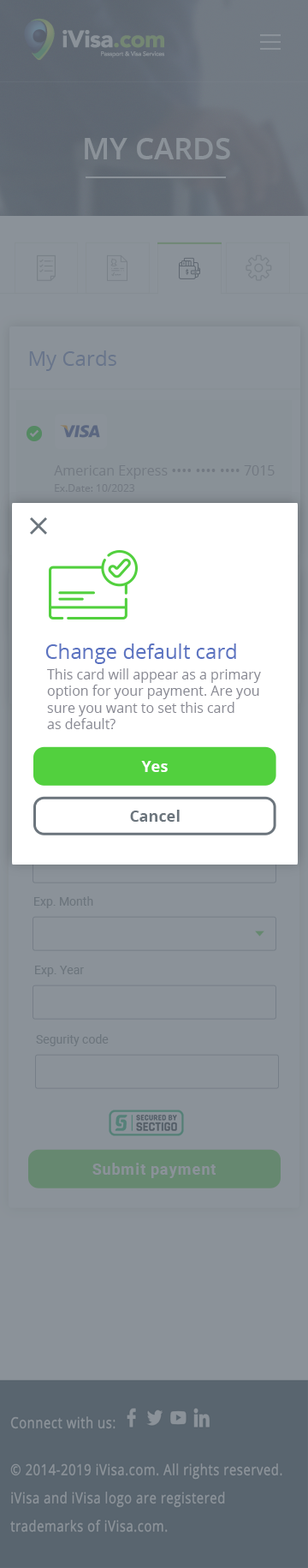
<style>
.page{position:relative;width:308px;height:1568px;background:#8b9299}
.page>*{position:absolute;margin:0}
.t1{font:30px "OpenSans-Semibold";color:#8b9299;text-transform:uppercase}
.t2{font:20.6px "OpenSans";color:#68758b}
.t3{font:13.7px "OpenSans";color:#878892}
.t4{font:10.3px "OpenSans";color:#878892}
.t5{font:20.6px "OpenSans";color:#5b73c1}
.t6{font:15.4px "OpenSans-Bold";color:#ffffff}
.t7{font:15.4px "OpenSans-Bold";color:#6c757d}
.t8{font:12px "Roboto-Regular";color:#6c757d}
.t9{font:12px "Roboto-Regular";color:#6c757d;text-transform:uppercase}
.t10{font:15.4px "Roboto-Bold";letter-spacing:0.05em;color:#8b9299}
</style>
<div class="page">
<p class="t1" style="left:85px;top:138px;width:145px;height:21px">MY CARDS</p>
<p class="t2" style="left:29px;top:350px;width:88px;height:21px">My Cards</p>
<p class="t2" style="left:29px;top:350px;width:88px;height:21px">My Cards</p>
<p class="t3" style="left:54px;top:465px;width:221px;height:14px">American Express •••• •••• •••• 7015</p>
<p class="t3" style="left:54px;top:465px;width:221px;height:14px">American Express •••• •••• •••• 7015</p>
<p class="t4" style="left:55px;top:484px;width:80px;height:8px">Ex.Date: 10/2023</p>
<p class="t4" style="left:55px;top:484px;width:80px;height:8px">Ex.Date: 10/2023</p>
<p class="t5" style="left:45px;top:643px;width:191px;height:21px">Change default card</p>
<p class="t3" style="left:47px;top:668px;width:214px;height:61px">This card will appear as a primary option for your payment. Are you sure you want to set this card<br>as default?</p>
<p class="t6" style="left:141px;top:761px;width:27px;height:11px">Yes</p>
<p class="t7" style="left:130px;top:810px;width:50px;height:12px">Cancel</p>
<p class="t8" style="left:34px;top:896px;width:59px;height:12px"><span class="t9">E</span>xp. Month</p>
<p class="t8" style="left:35px;top:966px;width:49px;height:11px">Exp. Year</p>
<p class="t8" style="left:36px;top:1034px;width:73px;height:12px">Segurity code</p>
<p class="t10" style="left:93px;top:1163px;width:123px;height:15px">Submit payment</p>
</div>
